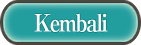
<style>
.page{position:relative;width:141px;height:45px}
.page>*{position:absolute;margin:0}
.t1{font:24px "RyuminPro-ExBold";letter-spacing:-0.08em;color:#ffffff;scale:0.9 1}
</style>
<div class="page">
<p class="t1" style="left:34px;top:13px;width:74px;height:20px">Kembali</p>
</div>
